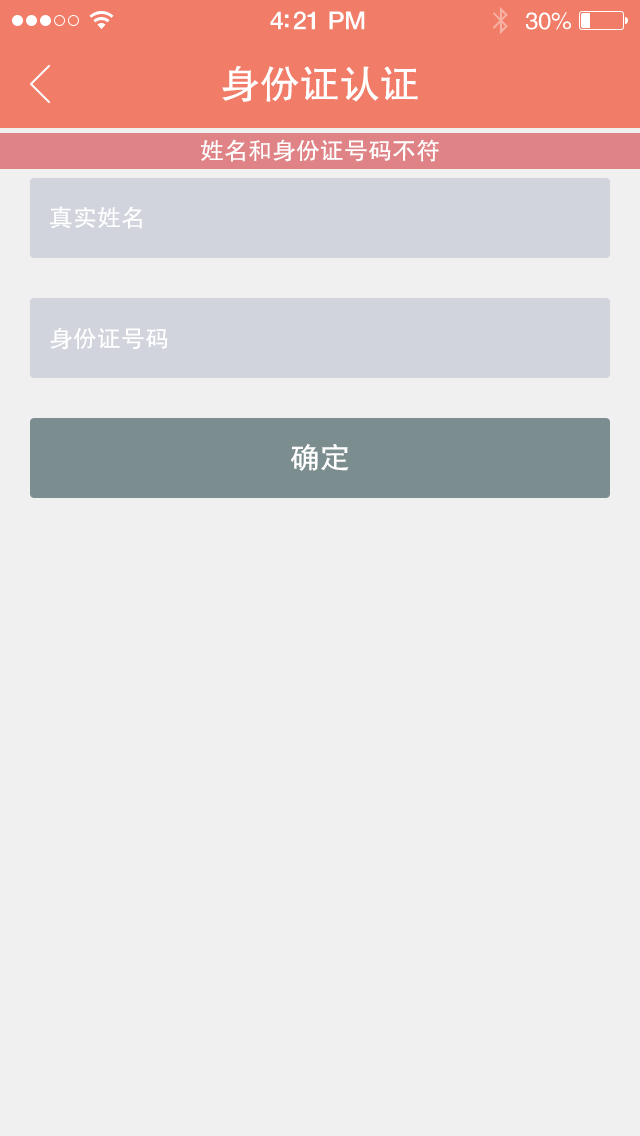
<style>
.page{position:relative;width:640px;height:1136px;background:#f0f0f0}
.page>*{position:absolute;margin:0}
.t1{font:25px "HelveticaNeue-Medium";letter-spacing:-0.02em;color:#ffffff}
.t2{font:24px "FZHTJW--GB1-0";letter-spacing:-0.02em;color:#ffffff}
.t3{font:40px "FZHTJW--GB1-0";color:#ffffff}
.t4{font:24px "FZHTJW--GB1-0";color:#ffffff}
.t5{font:30px "FZHTJW--GB1-0";color:#ffffff}
</style>
<div class="page">
<p class="t1" style="left:270px;top:11px;width:95px;height:19px">4:21 PM</p>
<p class="t2" style="left:525px;top:12px;width:46px;height:18px">30%</p>
<p class="t3" style="left:222px;top:66px;width:196px;height:36px">身份证认证</p>
<p class="t4" style="left:201px;top:139px;width:238px;height:23px">姓名和身份证号码不符</p>
<p class="t4" style="left:50px;top:206px;width:92px;height:23px">真实姓名</p>
<p class="t4" style="left:50px;top:327px;width:118px;height:23px">身份证号码</p>
<p class="t5" style="left:290px;top:443px;width:59px;height:28px">确定</p>
</div>
